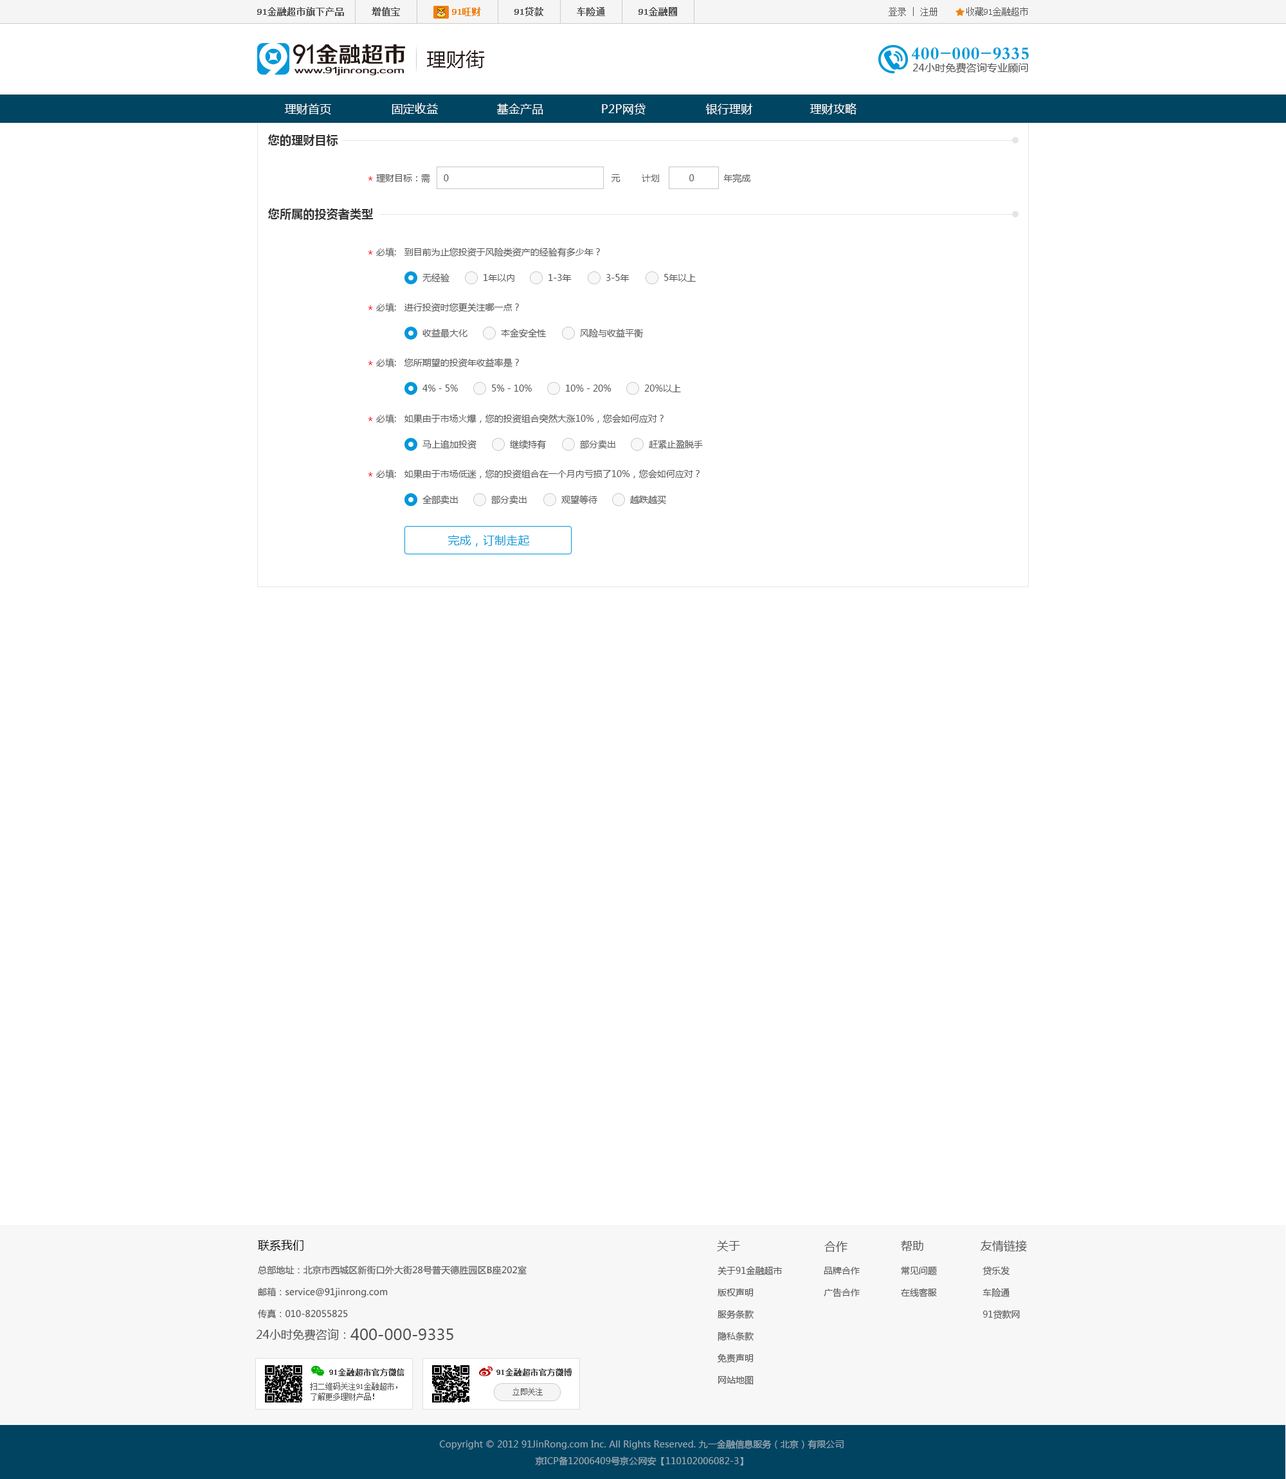
<style>
.page{position:relative;width:1286px;height:1479px;background:#ffffff}
.page>*{position:absolute;margin:0}
.t1{font:19.3px "MicrosoftYaHei";letter-spacing:0.01em;color:#231815}
.t2{font:11.6px "MicrosoftYaHei";letter-spacing:0.01em;color:#ffffff}
.t3{font:11.6px "MicrosoftYaHei-Bold";letter-spacing:0.01em;color:#333333}
.t4{font:9px "MicrosoftYaHei";color:#555555}
.t5{font:11.6px "MicrosoftYaHei";letter-spacing:0.01em;color:#ff0000}
.t6{font:11.6px "MicrosoftYaHei";letter-spacing:0.01em;color:#0098d9}
</style>
<div class="page">
<p class="t1" style="left:426px;top:50px;width:59px;height:19px">理财街</p>
<p class="t2" style="left:285px;top:104px;width:46px;height:10px">理财首页</p>
<p class="t2" style="left:392px;top:103px;width:46px;height:11px">固定收益</p>
<p class="t2" style="left:497px;top:103px;width:46px;height:11px">基金产品</p>
<p class="t2" style="left:602px;top:104px;width:43px;height:10px">P2P网贷</p>
<p class="t2" style="left:705px;top:104px;width:48px;height:10px">银行理财</p>
<p class="t2" style="left:810px;top:103px;width:46px;height:11px">理财攻略</p>
<p class="t3" style="left:268px;top:134px;width:70px;height:12px">您的理财目标</p>
<p class="t4" style="left:376px;top:174px;width:244px;height:9px">理财目标：需     0                                                             元</p>
<p class="t4" style="left:642px;top:174px;width:109px;height:9px">计划           0           年完成</p>
<p class="t5" style="left:368px;top:176px;width:5px;height:5px">*</p>
<p class="t3" style="left:268px;top:208px;width:105px;height:12px">您所属的投资者类型</p>
<p class="t5" style="left:368px;top:250px;width:5px;height:5px">*</p>
<p class="t4" style="left:376px;top:248px;width:224px;height:9px">必填:   到目前为止您投资于风险类资产的经验有多少年？</p>
<p class="t4" style="left:422px;top:273px;width:27px;height:9px">无经验</p>
<p class="t4" style="left:483px;top:274px;width:31px;height:8px">1年以内</p>
<p class="t4" style="left:548px;top:274px;width:24px;height:8px">1-3年</p>
<p class="t4" style="left:606px;top:274px;width:23px;height:8px">3-5年</p>
<p class="t4" style="left:664px;top:274px;width:32px;height:8px">5年以上</p>
<p class="t5" style="left:368px;top:305px;width:5px;height:5px">*</p>
<p class="t4" style="left:376px;top:303px;width:143px;height:9px">必填:   进行投资时您更关注哪一点？</p>
<p class="t4" style="left:422px;top:328px;width:45px;height:10px">收益最大化</p>
<p class="t4" style="left:501px;top:328px;width:45px;height:10px">本金安全性</p>
<p class="t4" style="left:580px;top:328px;width:64px;height:10px">风险与收益平衡</p>
<p class="t5" style="left:368px;top:361px;width:5px;height:4px">*</p>
<p class="t4" style="left:376px;top:358px;width:143px;height:10px">必填:   您所期望的投资年收益率是？</p>
<p class="t4" style="left:422px;top:384px;width:36px;height:8px">4%－5%</p>
<p class="t4" style="left:492px;top:384px;width:40px;height:8px">5%－10%</p>
<p class="t4" style="left:566px;top:384px;width:45px;height:8px">10%－20%</p>
<p class="t4" style="left:644px;top:384px;width:37px;height:8px">20%以上</p>
<p class="t5" style="left:368px;top:417px;width:5px;height:4px">*</p>
<p class="t4" style="left:376px;top:414px;width:287px;height:10px">必填:   如果由于市场火爆，您的投资组合突然大涨10%，您会如何应对？</p>
<p class="t4" style="left:422px;top:440px;width:54px;height:9px">马上追加投资</p>
<p class="t4" style="left:510px;top:440px;width:36px;height:9px">继续持有</p>
<p class="t4" style="left:580px;top:440px;width:35px;height:9px">部分卖出</p>
<p class="t4" style="left:649px;top:440px;width:54px;height:9px">赶紧止盈脱手</p>
<p class="t5" style="left:368px;top:472px;width:5px;height:4px">*</p>
<p class="t4" style="left:376px;top:469px;width:323px;height:10px">必填:   如果由于市场低迷，您的投资组合在一个月内亏损了10%，您会如何应对？</p>
<p class="t4" style="left:422px;top:495px;width:36px;height:9px">全部卖出</p>
<p class="t4" style="left:491px;top:495px;width:35px;height:9px">部分卖出</p>
<p class="t4" style="left:561px;top:495px;width:36px;height:9px">观望等待</p>
<p class="t4" style="left:630px;top:495px;width:36px;height:10px">越跌越买</p>
<p class="t6" style="left:447px;top:535px;width:83px;height:11px">完成，订制走起</p>
</div>
